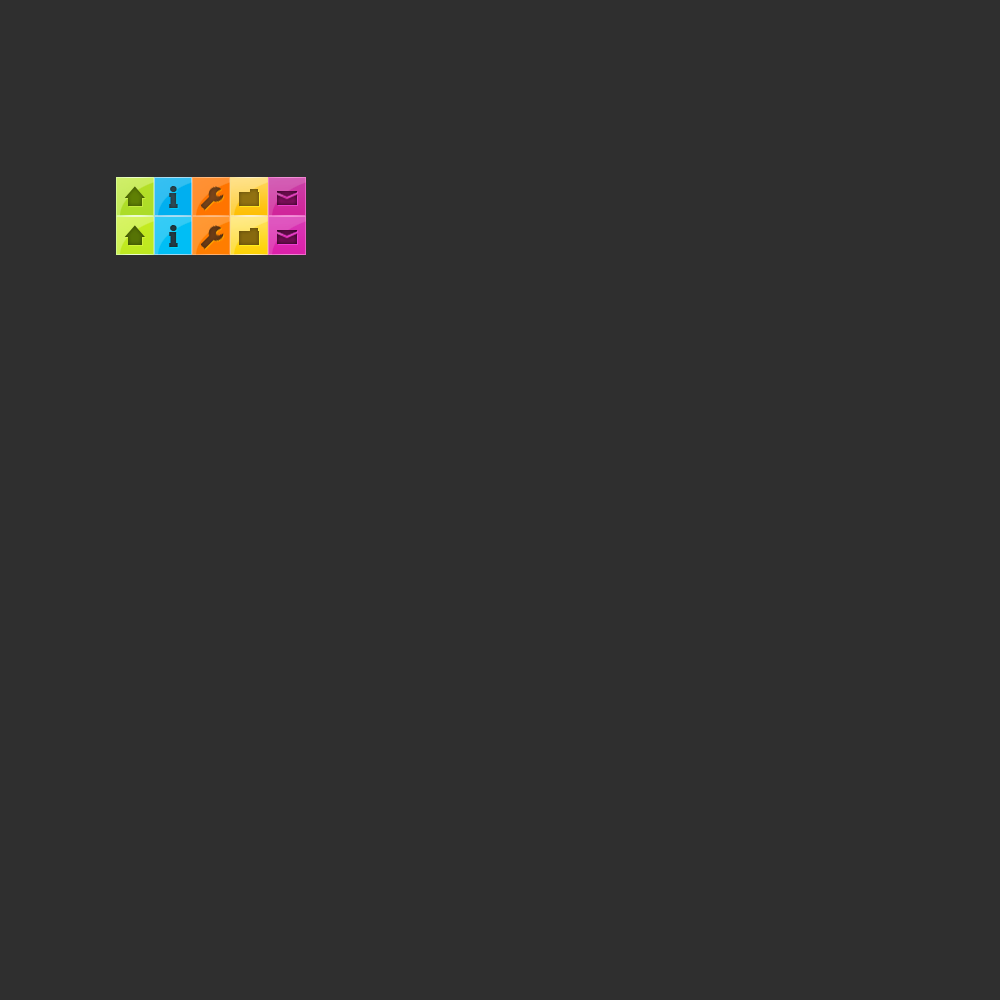
<style>
.page{position:relative;width:1000px;height:1000px;background:#2f2f2f}
.page>*{position:absolute;margin:0}
.t1{font:30px "ChunkFive";color:#2d4b56}
.t2{font:30px "ChunkFive";color:#1f353d}
</style>
<div class="page">
<p class="t1" style="left:169px;top:186px;width:9px;height:22px">i</p>
<p class="t2" style="left:169px;top:225px;width:9px;height:22px">i</p>
</div>
